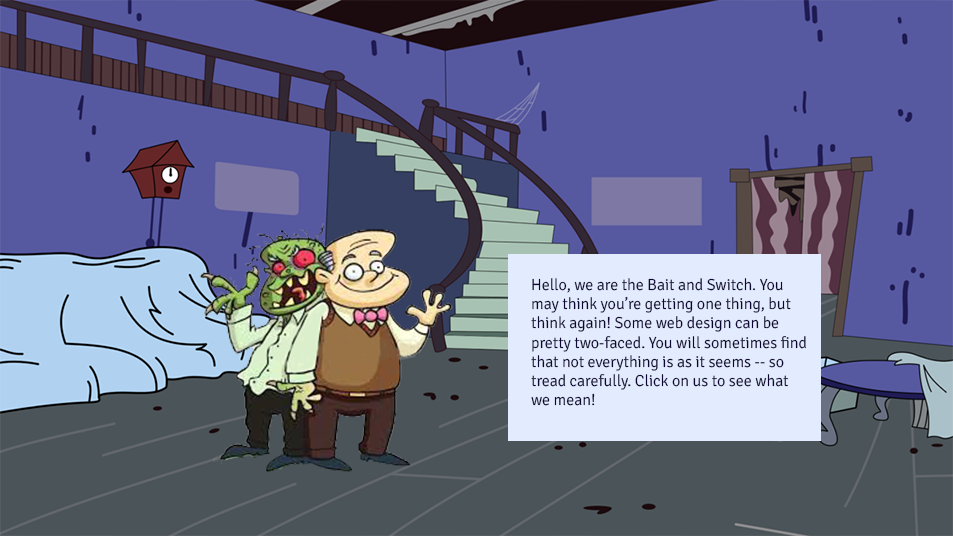
<style>
.page{position:relative;width:953px;height:536px;background:#5658a0}
.page>*{position:absolute;margin:0}
.t1{font:16px "Signika-Light";color:#0d0630}
</style>
<div class="page">
<p class="t1" style="left:531px;top:278px;width:275px;height:128px">Hello, we are the Bait and Switch. You may think you’re getting one thing, but think again! Some web design can be pretty two-faced. You will sometimes find that not everything is as it seems -- so tread carefully. Click on us to see what we mean!</p>
</div>
